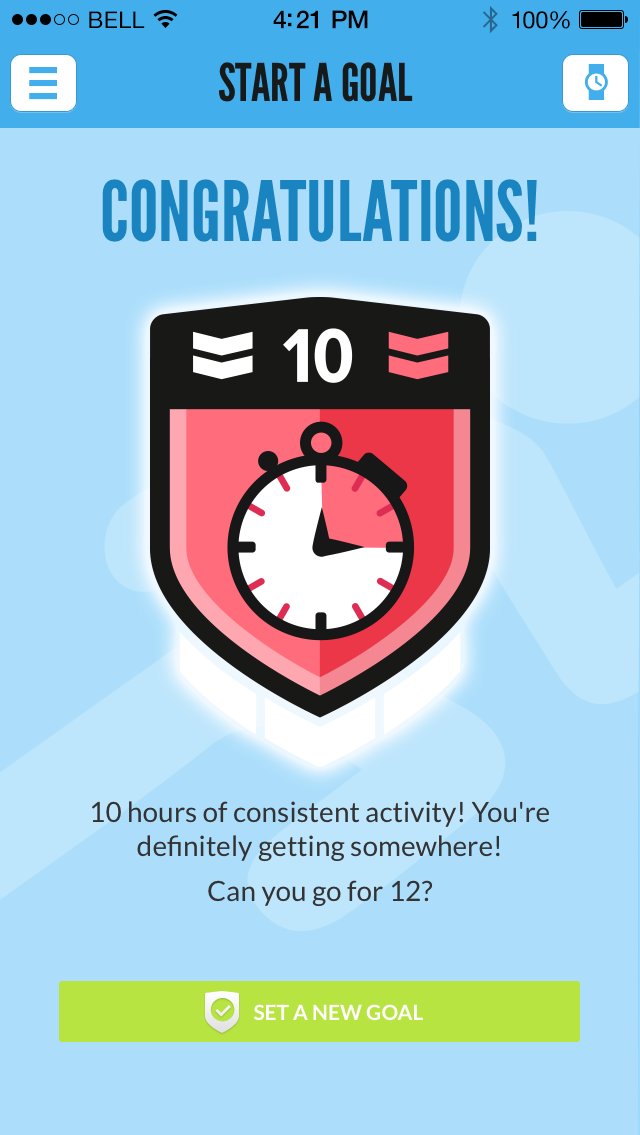
<style>
.page{position:relative;width:640px;height:1135px;background:#acdefb}
.page>*{position:absolute;margin:0}
.t1{font:23px "HelveticaNeue";letter-spacing:0.02em;color:#000000}
.t2{font:25px "HelveticaNeue-Medium";letter-spacing:-0.02em;color:#000000}
.t3{font:24px "HelveticaNeue";letter-spacing:-0.02em;color:#010101}
.t4{font:52px "LeagueGothic";color:#161a1a;text-transform:uppercase}
.t5{font:83px "LeagueGothic-Regular";color:#1a84c1;text-transform:uppercase}
.t6{font:28px "Lato-Regular";color:#333333}
.t7{font:21px "Lato-Bold";color:#ffffff}
</style>
<div class="page">
<p class="t1" style="left:89px;top:11px;width:56px;height:17px">BELL</p>
<p class="t2" style="left:273px;top:10px;width:95px;height:19px">4:21 PM</p>
<p class="t3" style="left:512px;top:11px;width:58px;height:18px">100%</p>
<p class="t4" style="left:219px;top:62px;width:194px;height:40px">START A GOAL</p>
<p class="t5" style="left:102px;top:179px;width:435px;height:63px">CONGRATULATIONS!</p>
<p class="t6" style="left:92px;top:801px;width:457px;height:106px;text-align:center">10 hours of consistent activity! You're definitely getting somewhere! <br>Can you go for 12?</p>
<p class="t7" style="left:254px;top:1004px;width:169px;height:17px">SET A NEW GOAL</p>
</div>
